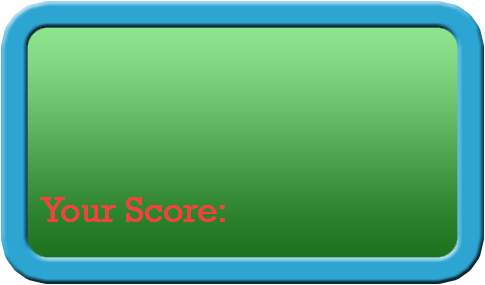
<style>
.page{position:relative;width:485px;height:285px}
.page>*{position:absolute;margin:0}
.t1{font:36px "Rockwell";color:#ff3b3b}
</style>
<div class="page">
<p class="t1" style="left:40px;top:197px;width:185px;height:25px">Your Score:</p>
</div>
